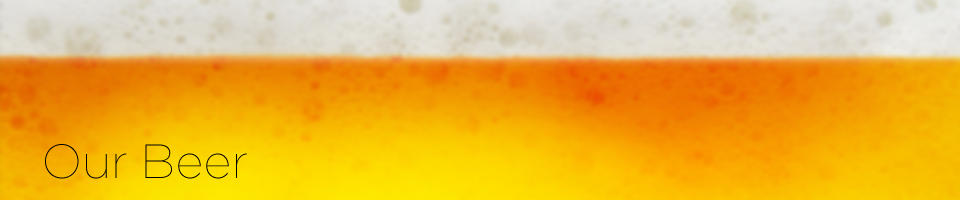
<style>
.page{position:relative;width:960px;height:200px}
.page>*{position:absolute;margin:0}
.t1{font:48px "Gotham-Thin";color:#000000}
</style>
<div class="page">
<p class="t1" style="left:45px;top:144px;width:202px;height:35px">Our Beer</p>
</div>
